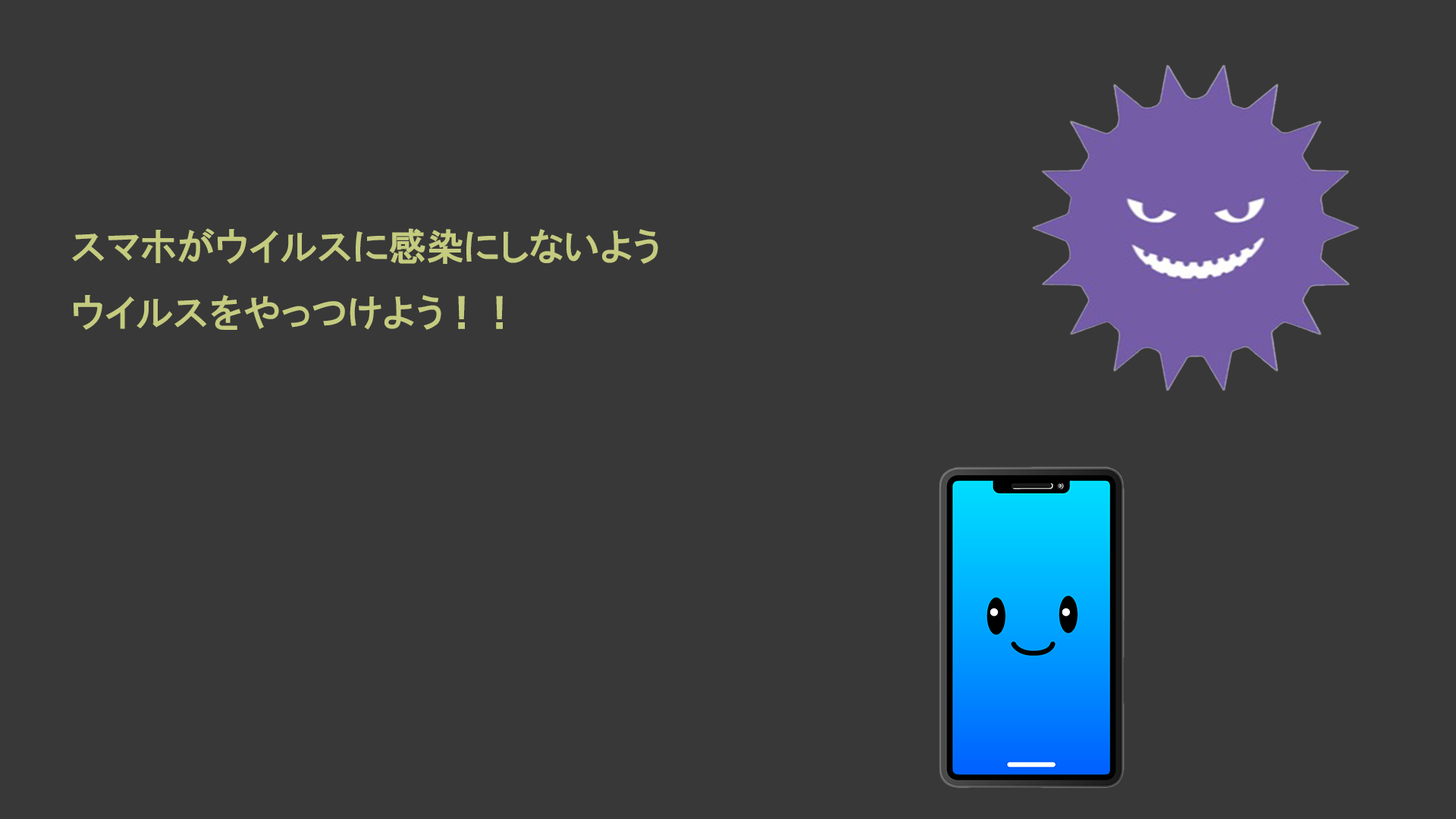
<style>
.page{position:relative;width:1456px;height:819px;background:#383838}
.page>*{position:absolute;margin:0}
.t1{font:9.1px "HGPGothicE";color:#c5cb7f}
</style>
<div class="page">
<p class="t1" style="left:72px;top:228px;width:586px;height:102px">スマホがウイルスに感染にしないよう<br>ウイルスをやっつけよう！！</p>
</div>
